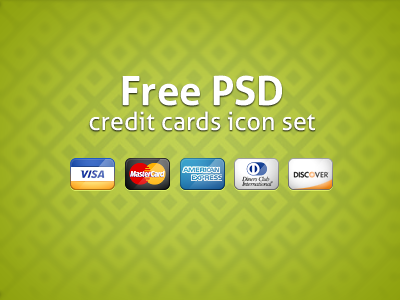
<style>
.page{position:relative;width:400px;height:300px}
.page>*{position:absolute;margin:0}
.t1{font:25.1px/25.1px "Aller";color:#ffffff}
.t2{font:40.2px/18.4px "Aller-Bold";color:#ffffff}
</style>
<div class="page">
<p class="t1" style="left:89px;top:75px;width:226px;height:56px;text-align:center"><span class="t2">Free PSD<br></span>credit cards icon set</p>
</div>
